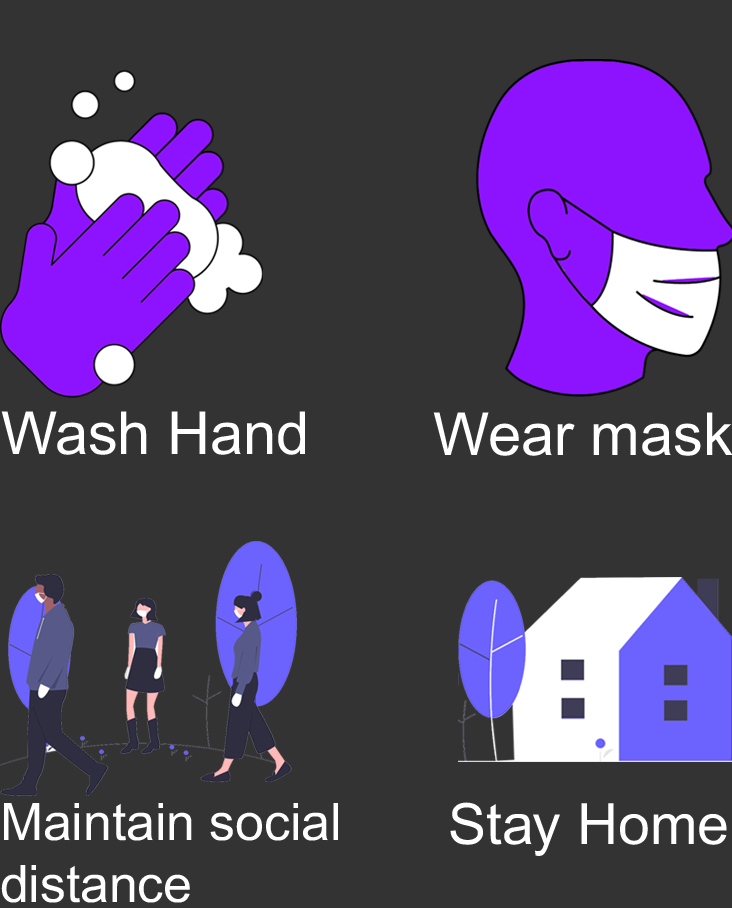
<style>
.page{position:relative;width:732px;height:908px;background:#333333}
.page>*{position:absolute;margin:0}
.t1{font:59.5px "ArialMT";color:#ffffff}
.t2{font:51.8px "ArialMT";color:#ffffff}
.t3{font:57px "ArialMT";color:#ffffff}
</style>
<div class="page">
<p class="t1" style="left:1px;top:411px;width:304px;height:44px">Wash Hand</p>
<p class="t1" style="left:433px;top:412px;width:300px;height:44px">Wear mask</p>
<p class="t2" style="left:1px;top:803px;width:337px;height:100px">Maintain social<br>distance</p>
<p class="t3" style="left:450px;top:802px;width:277px;height:54px">Stay Home</p>
</div>
